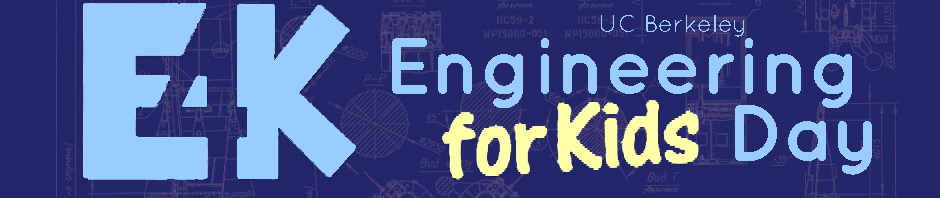
<style>
.page{position:relative;width:940px;height:198px;background:#23266b}
.page>*{position:absolute;margin:0}
.t1{font:24px "Quicksand-Regular";color:#99ccff}
.t2{font:80px "Quicksand-Bold";color:#99ccff}
</style>
<div class="page">
<p class="t1" style="left:601px;top:15px;width:143px;height:22px">UC Berkeley</p>
<p class="t2" style="left:392px;top:38px;width:460px;height:70px">Engineering</p>
<p class="t2" style="left:735px;top:105px;width:137px;height:70px">Day</p>
</div>
